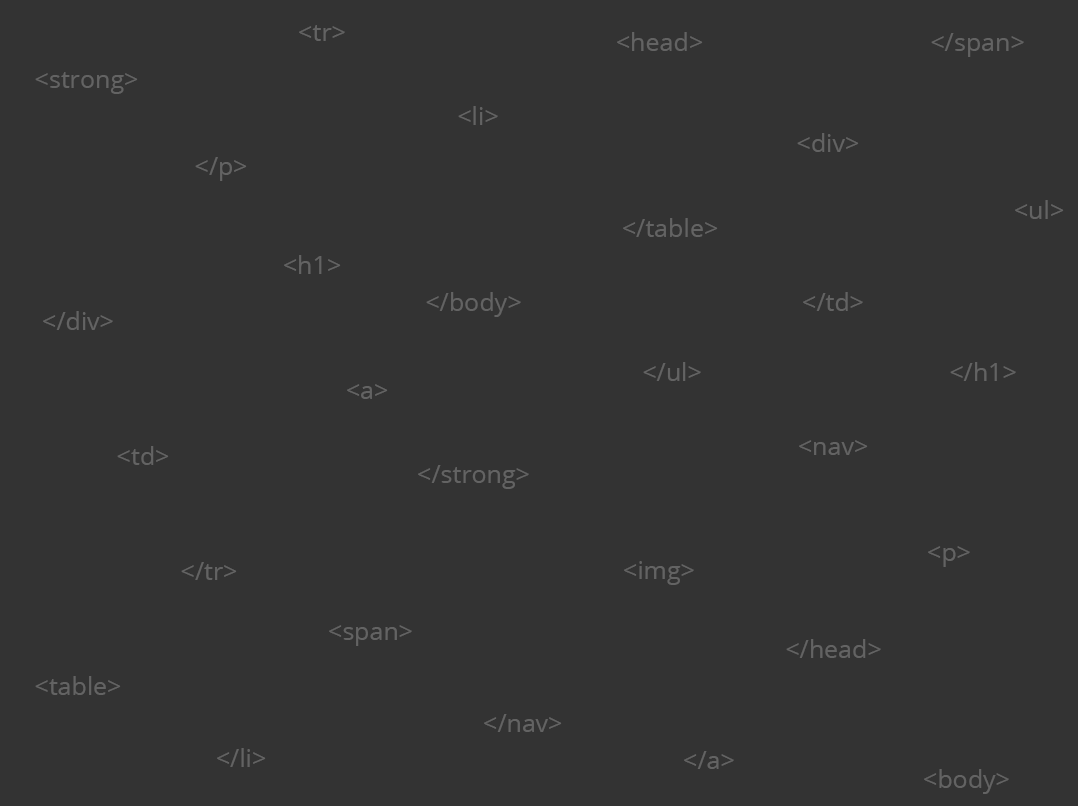
<style>
.page{position:relative;width:1078px;height:806px;background:#333333}
.page>*{position:absolute;margin:0}
.t1{font:25px "OpenSans";color:#636363}
</style>
<div class="page">
<p class="t1" style="left:299px;top:25px;width:46px;height:16px">&lt;tr&gt;</p>
<p class="t1" style="left:617px;top:32px;width:86px;height:19px">&lt;head&gt;</p>
<p class="t1" style="left:931px;top:33px;width:93px;height:24px">&lt;/span&gt;</p>
<p class="t1" style="left:35px;top:72px;width:103px;height:22px">&lt;strong&gt;</p>
<p class="t1" style="left:458px;top:106px;width:40px;height:19px">&lt;li&gt;</p>
<p class="t1" style="left:797px;top:133px;width:62px;height:19px">&lt;div&gt;</p>
<p class="t1" style="left:195px;top:157px;width:52px;height:24px">&lt;/p&gt;</p>
<p class="t1" style="left:1015px;top:200px;width:49px;height:19px">&lt;ul&gt;</p>
<p class="t1" style="left:623px;top:218px;width:95px;height:19px">&lt;/table&gt;</p>
<p class="t1" style="left:284px;top:255px;width:57px;height:19px">&lt;h1&gt;</p>
<p class="t1" style="left:426px;top:292px;width:95px;height:25px">&lt;/body&gt;</p>
<p class="t1" style="left:803px;top:292px;width:60px;height:19px">&lt;/td&gt;</p>
<p class="t1" style="left:43px;top:311px;width:70px;height:19px">&lt;/div&gt;</p>
<p class="t1" style="left:643px;top:362px;width:58px;height:19px">&lt;/ul&gt;</p>
<p class="t1" style="left:950px;top:362px;width:66px;height:19px">&lt;/h1&gt;</p>
<p class="t1" style="left:347px;top:384px;width:41px;height:15px">&lt;a&gt;</p>
<p class="t1" style="left:117px;top:446px;width:52px;height:19px">&lt;td&gt;</p>
<p class="t1" style="left:799px;top:440px;width:69px;height:15px">&lt;nav&gt;</p>
<p class="t1" style="left:418px;top:465px;width:111px;height:24px">&lt;/strong&gt;</p>
<p class="t1" style="left:928px;top:546px;width:42px;height:21px">&lt;p&gt;</p>
<p class="t1" style="left:181px;top:562px;width:56px;height:18px">&lt;/tr&gt;</p>
<p class="t1" style="left:624px;top:561px;width:70px;height:24px">&lt;img&gt;</p>
<p class="t1" style="left:329px;top:625px;width:83px;height:21px">&lt;span&gt;</p>
<p class="t1" style="left:786px;top:639px;width:95px;height:19px">&lt;/head&gt;</p>
<p class="t1" style="left:35px;top:676px;width:86px;height:19px">&lt;table&gt;</p>
<p class="t1" style="left:484px;top:714px;width:78px;height:18px">&lt;/nav&gt;</p>
<p class="t1" style="left:217px;top:748px;width:49px;height:19px">&lt;/li&gt;</p>
<p class="t1" style="left:684px;top:751px;width:50px;height:18px">&lt;/a&gt;</p>
<p class="t1" style="left:924px;top:769px;width:85px;height:25px">&lt;body&gt;</p>
</div>
